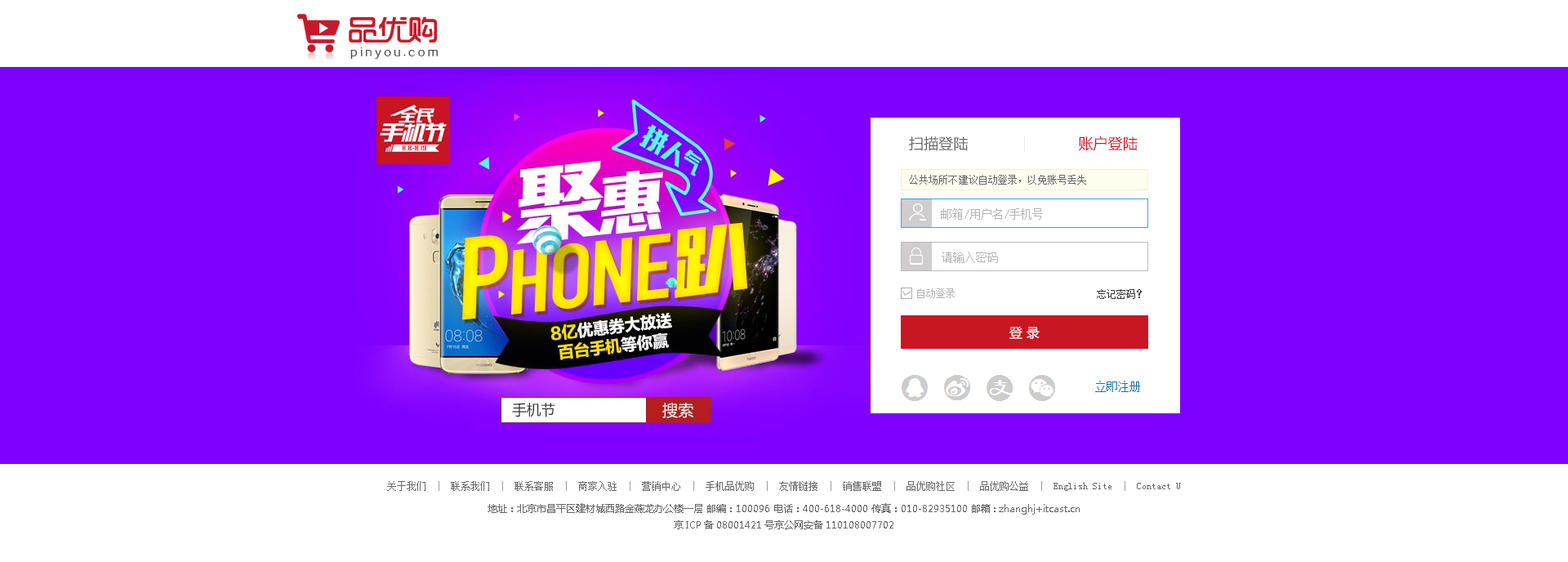
<style>
.page{position:relative;width:1568px;height:562px;background:#ffffff}
.page>*{position:absolute;margin:0}
.t1{font:14.7px "MicrosoftYaHei";letter-spacing:0.01em;color:#666666}
.t2{font:14.7px "MicrosoftYaHei";letter-spacing:0.01em;color:#c81623}
.t3{font:9.8px "SimSun";letter-spacing:0.01em;color:#666666}
.t4{font:11.4px "SimSun";color:#b3b3b3}
.t5{font:9.8px "SimSun";color:#b3b3b3}
.t6{font:9.8px "SimSun";color:#333333}
.t7{font:13.1px "MicrosoftYaHei";color:#ffffff}
.t8{font:11.4px "SimSun";color:#1474af}
.t9{font:9.8px/16.3px "MicrosoftYaHei";color:#666666}
.t10{font:9.8px/22.9px "SimSun";color:#666666}
.t11{font:9.8px/22.9px "SimSun";color:#999999}
.t12{font:9.8px/10.6px "MicrosoftYaHei";color:#666666}
</style>
<div class="page">
<p class="t1" style="left:909px;top:136px;width:229px;height:15px">扫描登陆                          <span class="t2">账户登陆</span></p>
<p class="t3" style="left:909px;top:175px;width:177px;height:10px">公共场所不建议自动登录，以免账号丢失</p>
<p class="t4" style="left:941px;top:208px;width:102px;height:12px">邮箱/用户名/手机号</p>
<p class="t4" style="left:942px;top:252px;width:56px;height:11px">请输入密码</p>
<p class="t5" style="left:917px;top:288px;width:38px;height:10px">自动登录</p>
<p class="t6" style="left:1097px;top:289px;width:45px;height:10px">忘记密码？</p>
<p class="t7" style="left:1009px;top:326px;width:31px;height:13px">登 录</p>
<p class="t8" style="left:1095px;top:381px;width:45px;height:11px">立即注册</p>
<p class="t9" style="left:387px;top:481px;width:794px;height:48px;text-align:center"><span class="t10">关于我们  </span><span class="t11">|</span><span class="t10">  联系我们  </span><span class="t11">|</span><span class="t10">  联系客服  </span><span class="t11">|</span><span class="t10">  商家入驻  </span><span class="t11">|</span><span class="t10">  营销中心  </span><span class="t11">|</span><span class="t10">  手机品优购  </span><span class="t11">|</span><span class="t10">  友情链接  </span><span class="t11">|</span><span class="t10">  销售联盟  </span><span class="t11">|</span><span class="t10">  品优购社区  </span><span class="t11">|</span><span class="t10">  品优购公益  </span><span class="t11">|</span><span class="t10">  English Site  </span><span class="t11">|</span><span class="t10">  Contact U<br></span>地址：北京市昌平区建材城西路金燕龙办公楼一层 邮编：100096 电话：400-618-4000 传真：010-82935100 邮箱: zhanghj+itcast.cn<br><span class="t12">京ICP备08001421号京公网安备110108007702</span></p>
</div>
